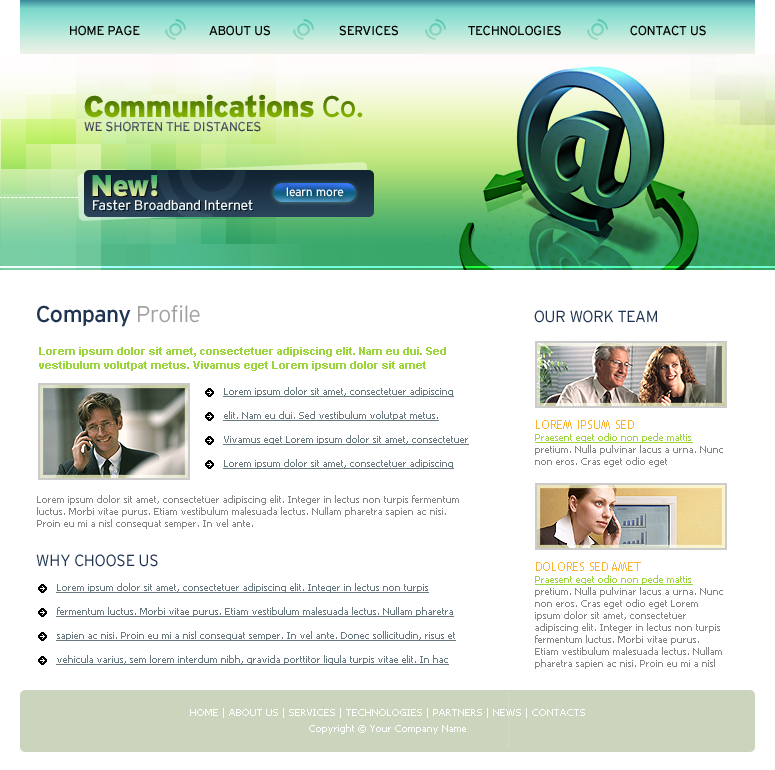
<style>
.page{position:relative;width:775px;height:770px;background:#ffffff}
.page>*{position:absolute;margin:0}
.t1{font:13px "Interstate-Regular";letter-spacing:-0.02em;color:#000000;text-transform:uppercase}
.t2{font:30px "Interstate-Black";letter-spacing:-0.02em}
.t3{font:30px "Interstate-Regular";letter-spacing:-0.02em}
.t4{font:13px "Interstate-Regular";letter-spacing:-0.02em;color:#515565;text-transform:uppercase}
.t5{font:12px "Interstate-Regular";letter-spacing:-0.02em;color:#ffffff}
.t6{font:14px "Interstate-Regular";letter-spacing:-0.02em;color:#e7f8fb}
.t7{font:23px "Interstate-Regular";letter-spacing:-0.02em;color:#1e3450}
.t8{font:23px "Interstate-Light";letter-spacing:-0.02em;color:#a1a1a1}
.t9{font:16px "Interstate-Light";letter-spacing:-0.02em;color:#1e3450;text-transform:uppercase}
.t10{font:11px/14px "Arial-BoldMT";color:#9dd53e}
.t11{font:10px/24px "Tahoma";color:#687a7f;text-decoration:underline}
.t12{font:10px/12px "Tahoma";color:#858585}
.t13{font:12px/10px "TrebuchetMS";color:#f9b331;text-transform:uppercase}
.t14{font:10px/12px "Tahoma";color:#9dd53e;text-decoration:underline}
.t15{font:10px/16px "Tahoma";color:#ffffff}
</style>
<div class="page">
<p class="t1" style="left:70px;top:25px;width:70px;height:11px">HOME PAGE</p>
<p class="t1" style="left:209px;top:25px;width:61px;height:11px">ABOUT US</p>
<p class="t1" style="left:339px;top:25px;width:59px;height:11px">SERVICES</p>
<p class="t1" style="left:468px;top:25px;width:93px;height:11px">TECHNOLOGIES</p>
<p class="t1" style="left:630px;top:25px;width:76px;height:11px">CONTACT US</p>
<p class="t2" style="left:84px;top:94px;width:279px;height:24px">Communications<span class="t3"> Co.</span></p>
<p class="t4" style="left:84px;top:121px;width:177px;height:11px">WE SHORTEN THE DISTANCES</p>
<p class="t2" style="left:92px;top:175px;width:66px;height:22px">New!</p>
<p class="t5" style="left:286px;top:187px;width:58px;height:10px">learn more</p>
<p class="t6" style="left:93px;top:199px;width:160px;height:12px">Faster Broadband Internet</p>
<p class="t7" style="left:37px;top:305px;width:163px;height:22px">Company <span class="t8">Profile</span></p>
<p class="t9" style="left:534px;top:310px;width:123px;height:13px">OUR WORK TEAM</p>
<p class="t10" style="left:39px;top:347px;width:407px;height:24px">Lorem ipsum dolor sit amet, consectetuer adipiscing elit. Nam eu dui. Sed vestibulum volutpat metus. Vivamus eget Lorem ipsum dolor sit amet</p>
<p class="t11" style="left:223px;top:387px;width:246px;height:82px">Lorem ipsum dolor sit amet, consectetuer adipiscing elit. Nam eu dui. Sed vestibulum volutpat metus. Vivamus eget Lorem ipsum dolor sit amet, consectetuer Lorem ipsum dolor sit amet, consectetuer adipiscing</p>
<p class="t12" style="left:535px;top:420px;width:188px;height:47px"><span class="t13">LOREM IPSUM sed <br></span><span class="t14">Praesent eget odio non pede mattis </span>pretium. Nulla pulvinar lacus a urna. Nunc non eros. Cras eget odio eget</p>
<p class="t12" style="left:37px;top:495px;width:422px;height:34px">Lorem ipsum dolor sit amet, consectetuer adipiscing elit. Integer in lectus non turpis fermentum luctus. Morbi vitae purus. Etiam vestibulum malesuada lectus. Nullam pharetra sapien ac nisi. Proin eu mi a nisl consequat semper. In vel ante.</p>
<p class="t9" style="left:36px;top:554px;width:122px;height:13px">WHY CHOOSE US</p>
<p class="t12" style="left:535px;top:562px;width:188px;height:107px"><span class="t13">DOLORES SED AMET<br></span><span class="t14">Praesent eget odio non pede mattis </span>pretium. Nulla pulvinar lacus a urna. Nunc non eros. Cras eget odio eget Lorem ipsum dolor sit amet, consectetuer adipiscing elit. Integer in lectus non turpis fermentum luctus. Morbi vitae purus. Etiam vestibulum malesuada lectus. Nullam pharetra sapien ac nisi. Proin eu mi a nisl</p>
<p class="t11" style="left:56px;top:583px;width:400px;height:82px">Lorem ipsum dolor sit amet, consectetuer adipiscing elit. Integer in lectus non turpis fermentum luctus. Morbi vitae purus. Etiam vestibulum malesuada lectus. Nullam pharetra sapien ac nisi. Proin eu mi a nisl consequat semper. In vel ante. Donec sollicitudin, risus et vehicula varius, sem lorem interdum nibh, gravida porttitor ligula turpis vitae elit. In hac</p>
<p class="t15" style="left:190px;top:708px;width:395px;height:26px;text-align:center">HOME | ABOUT US | SERVICES | TECHNOLOGIES | PARTNERS | NEWS | CONTACTS<br>Copyright © Your Company Name</p>
</div>
